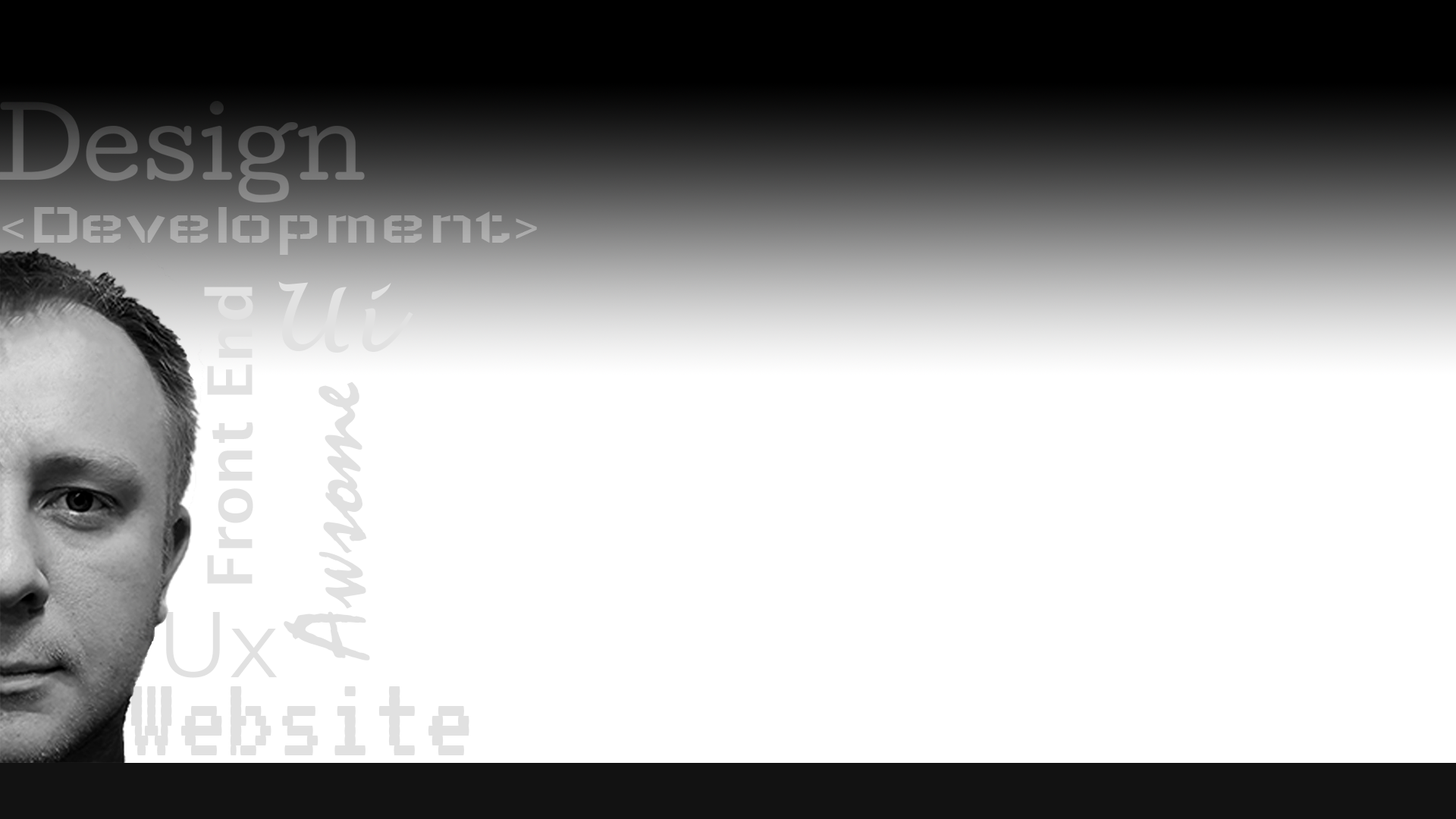
<style>
.page{position:relative;width:1456px;height:819px;background:#ffffff}
.page>*{position:absolute;margin:0}
.t1{font:61.9px "Wallpoet";color:#a7a7a7}
.t2{font:61.9px "LucidaSans-Demi";color:#e1e1e1}
.t3{font:111.4px "Mistral";color:#e1e1e1}
.t4{font:92.9px "Montserrat-Regular";color:#e1e1e1}
.t5{font:123.8px "VT323-Regular";color:#e1e1e1}
</style>
<div class="page">
<p class="t1" style="left:2px;top:207px;width:535px;height:48px">&lt;Development&gt;</p>
<p class="t2" style="left:204px;top:287px;width:49px;height:297px;rotate:-90deg">Front End</p>
<p class="t3" style="left:284px;top:381px;width:86px;height:279px;rotate:-90deg">Awsome</p>
<p class="t4" style="left:166px;top:612px;width:112px;height:66px">Ux</p>
<p class="t5" style="left:130px;top:686px;width:339px;height:69px">Website</p>
</div>
